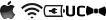
<style>
.page{position:relative;width:106px;height:20px;background:#ffffff}
.page>*{position:absolute;margin:0}
.t1{font:16px "Play-Bold";letter-spacing:-0.01em;color:#000000}
</style>
<div class="page">
<p class="t1" style="left:66px;top:5px;width:19px;height:12px">UC</p>
</div>
